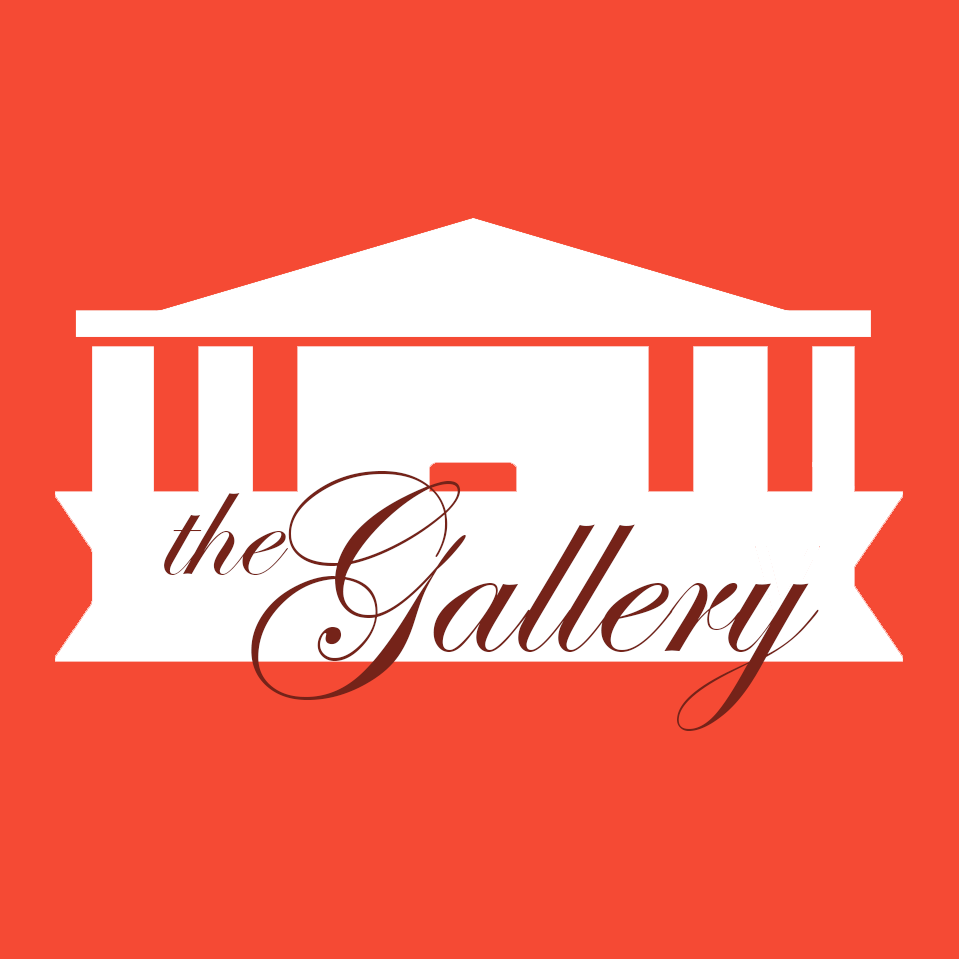
<style>
.page{position:relative;width:959px;height:959px;background:#f54a34}
.page>*{position:absolute;margin:0}
.t1{font:250px "EdwardianScriptITC";color:#752319}
.t2{font:160px "EdwardianScriptITC";color:#752319}
</style>
<div class="page">
<p class="t1" style="left:251px;top:471px;width:568px;height:260px">Gallery</p>
<p class="t2" style="left:164px;top:493px;width:124px;height:82px">the</p>
</div>
